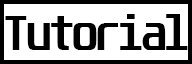
<style>
.page{position:relative;width:192px;height:64px;background:#ffffff}
.page>*{position:absolute;margin:0}
.t1{font:41.7px "Unispace-Bold";letter-spacing:-0.06em;color:#000000}
</style>
<div class="page">
<p class="t1" style="left:5px;top:14px;width:183px;height:36px">Tutorial</p>
</div>
